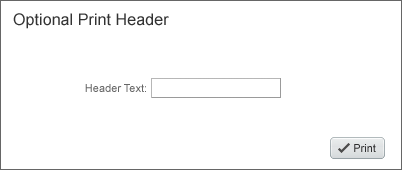
<style>
.page{position:relative;width:402px;height:170px;background:#ffffff}
.page>*{position:absolute;margin:0}
.t1{font:16px "ArialMT";letter-spacing:0.005em;color:#333333}
.t2{font:11px "ArialMT";color:#666666}
.t3{font:11px "ArialMT";color:#303030}
</style>
<div class="page">
<p class="t1" style="left:13px;top:13px;width:156px;height:16px">Optional Print Header</p>
<p class="t2" style="left:85px;top:84px;width:61px;height:8px">Header Text:</p>
<p class="t3" style="left:354px;top:144px;width:22px;height:8px">Print</p>
</div>
